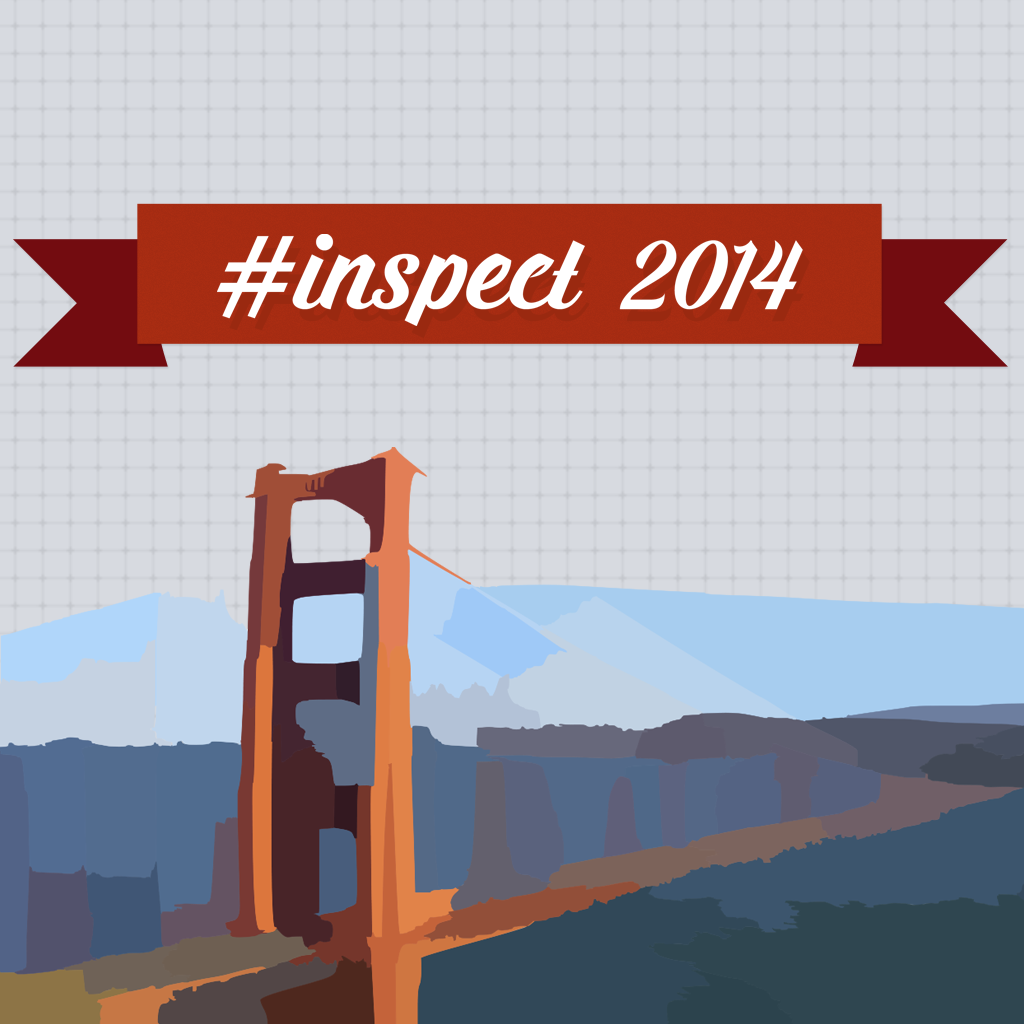
<style>
.page{position:relative;width:1024px;height:1024px;background:#d7dae0}
.page>*{position:absolute;margin:0}
.t1{font:109.2px "Prada";color:#ffffff}
.t2{font:89.5px "Prada";color:#ffffff}
</style>
<div class="page">
<p class="t1" style="left:217px;top:234px;width:586px;height:92px">#inspect  <span class="t2">2014</span></p>
</div>
